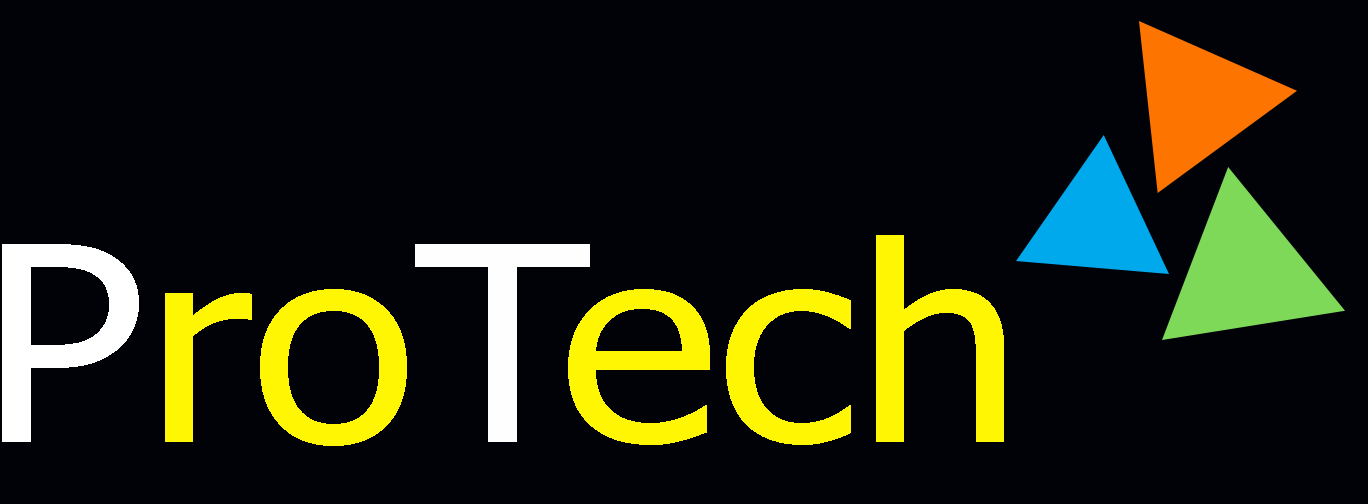
<style>
.page{position:relative;width:1368px;height:504px;background:#000208}
.page>*{position:absolute;margin:0}
.t1{font:272.8px "Tahoma";color:#fff603;scale:1.1 1}
.t2{font:272.8px "Tahoma";color:#ffffff;scale:1.1 1}
.t3{font:272.8px "Tahoma";color:#fefefe;scale:1.1 1}
</style>
<div class="page">
<p class="t1" style="left:2px;top:235px;width:1002px;height:211px"><span class="t2">P</span>ro<span class="t3">T</span>ech</p>
</div>
